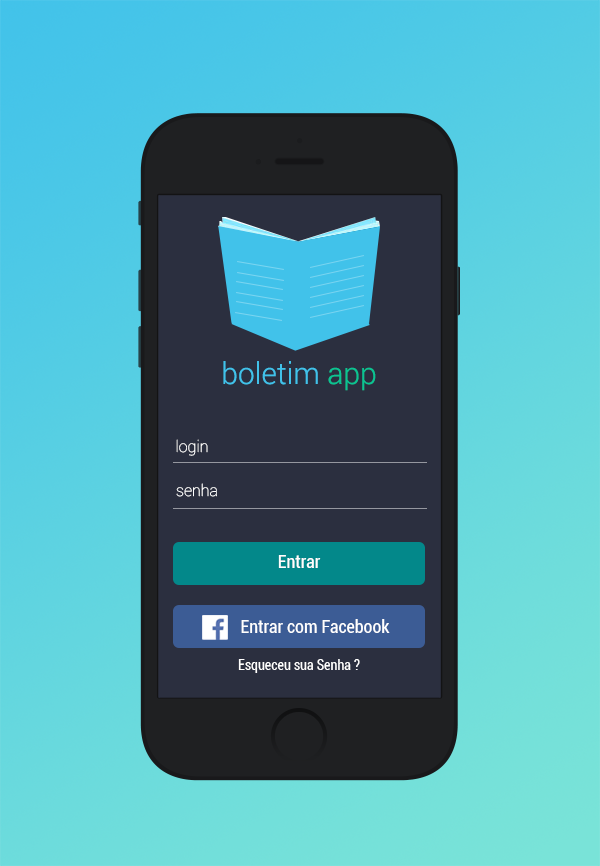
<style>
.page{position:relative;width:600px;height:866px;background:#2b2f3f}
.page>*{position:absolute;margin:0}
.t1{font:30px "Roboto-Light";color:#41c2ea}
.t2{font:30px "Roboto-Light";color:#0ac492}
.t3{font:16px "Roboto-Thin";color:#ffffff}
.t4{font:18px "Roboto-Condensed";color:#ffffff}
.t5{font:14px "Roboto-Condensed";color:#ffffff}
</style>
<div class="page">
<p class="t1" style="left:223px;top:361px;width:153px;height:30px">boletim <span class="t2">app</span></p>
<p class="t3" style="left:176px;top:439px;width:32px;height:17px">login</p>
<p class="t3" style="left:176px;top:483px;width:41px;height:14px">senha</p>
<p class="t4" style="left:278px;top:555px;width:43px;height:13px">Entrar</p>
<p class="t4" style="left:241px;top:619px;width:149px;height:14px">Entrar com Facebook</p>
<p class="t5" style="left:238px;top:659px;width:122px;height:14px">Esqueceu sua Senha ?</p>
</div>
